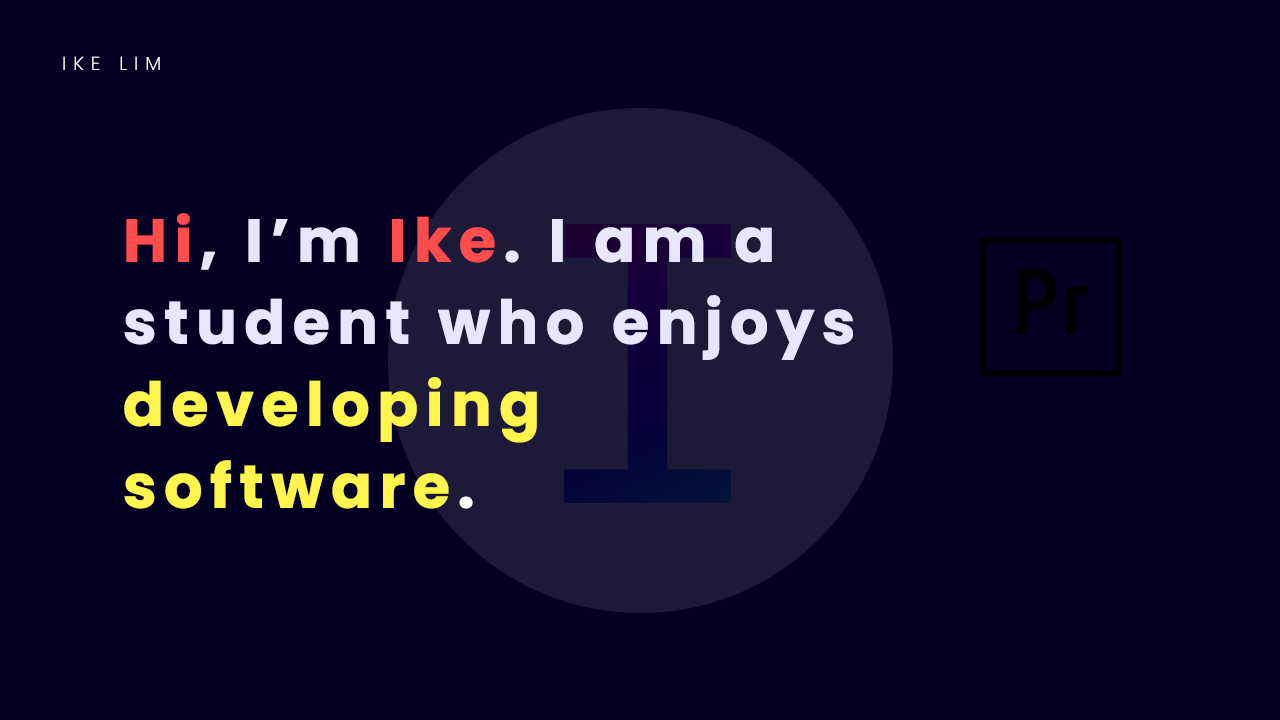
<style>
.page{position:relative;width:1280px;height:720px;background:#030023}
.page>*{position:absolute;margin:0}
.t1{font:19px "Poppins-Light";letter-spacing:0.36em;color:#ffffff}
.t2{font:60.2px/81px "Poppins-Bold";letter-spacing:0.1em;color:#e8e6ff;font-weight:bold}
.t3{font:60.2px/81px "Poppins-Bold";letter-spacing:0.1em;color:#ff4d4d;font-weight:bold}
.t4{font:60.2px/81px "Poppins-Bold";letter-spacing:0.1em;color:#fff54d;font-weight:bold}
.t5{font:60.2px/81px "Poppins-Bold";letter-spacing:0.1em;color:#ffffff;font-weight:bold}
</style>
<div class="page">
<p class="t1" style="left:63px;top:56px;width:97px;height:14px">IKE LIM</p>
<p class="t2" style="left:124px;top:213px;width:729px;height:296px"><span class="t3">Hi</span>, I’m <span class="t3">Ike</span>. I am a<br>student who enjoys<br><span class="t4">developing<br>software</span><span class="t5">.</span></p>
</div>
